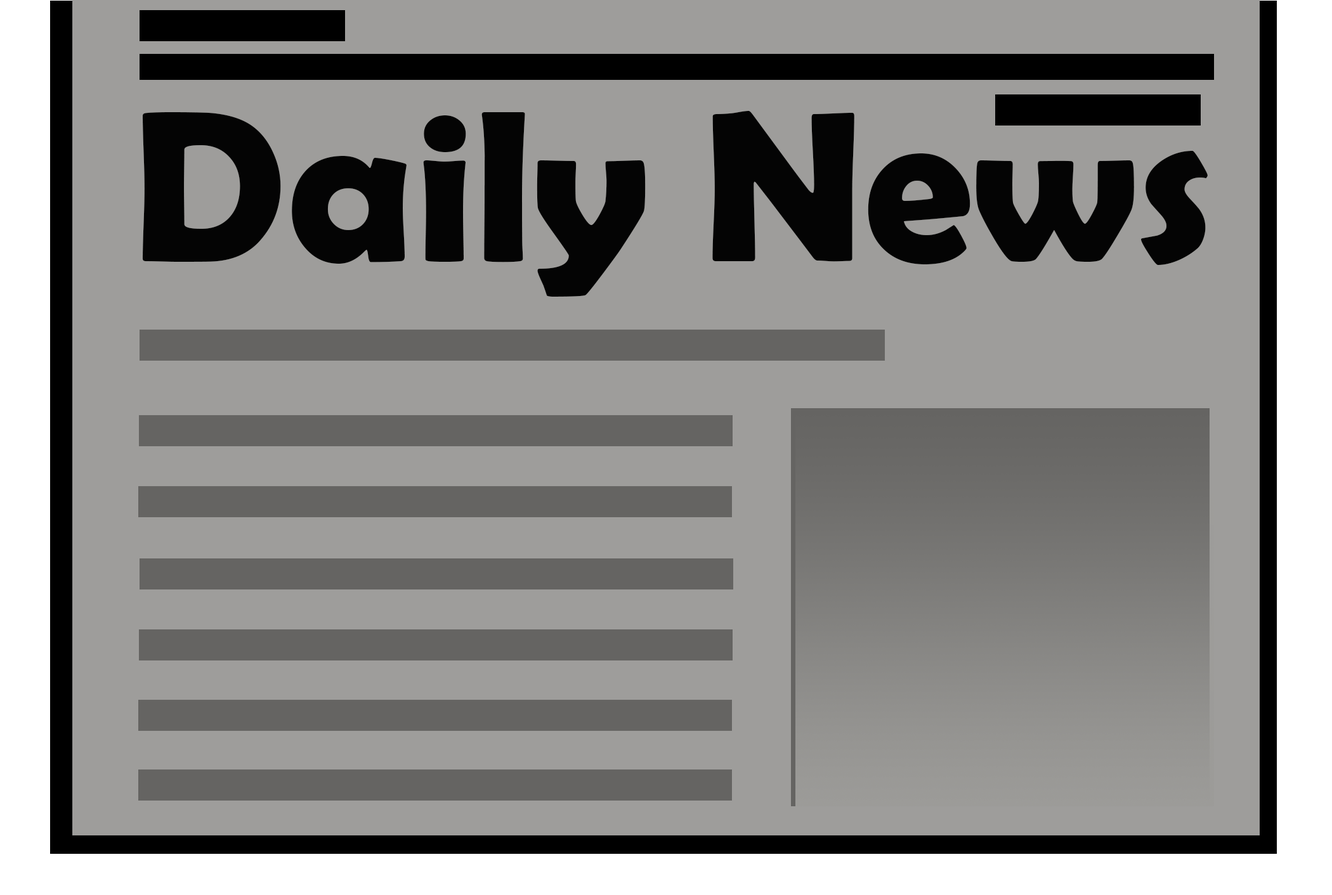
<style>
.page{position:relative;width:1332px;height:895px;background:#9e9d9b}
.page>*{position:absolute;margin:0}
.t1{font:216.7px "BerlinSansFBDemi-Bold";color:#040404}
</style>
<div class="page">
<p class="t1" style="left:143px;top:111px;width:1064px;height:186px">Daily News</p>
</div>
